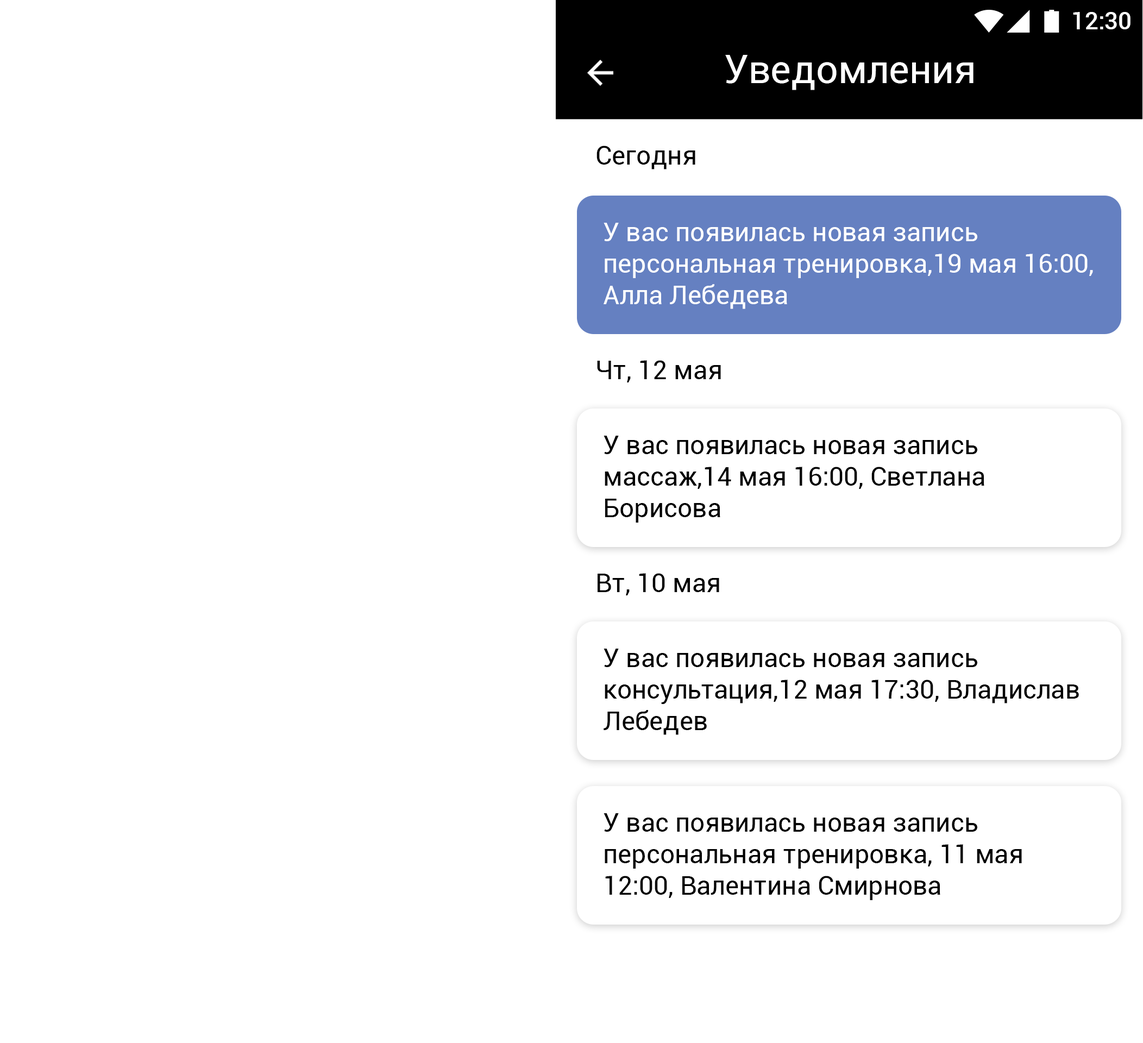
<style>
.page{position:relative;width:1143px;height:1043px;background:#ffffff}
.page>*{position:absolute;margin:0}
.t1{font:23.9px "Roboto-Medium";color:#ffffff}
.t2{font:39.1px "Roboto-Regular";color:#ffffff}
.t3{font:26.1px "Roboto-Regular";color:#000000}
.t4{font:26.1px "Roboto-Regular";color:#ffffff}
</style>
<div class="page">
<p class="t1" style="left:1073px;top:12px;width:58px;height:17px">12:30</p>
<p class="t2" style="left:725px;top:55px;width:249px;height:35px">Уведомления</p>
<p class="t3" style="left:597px;top:146px;width:98px;height:24px">Сегодня</p>
<p class="t4" style="left:604px;top:223px;width:489px;height:86px">У вас появилась новая запись <br>персональная тренировка,19 мая 16:00, Алла Лебедева</p>
<p class="t3" style="left:597px;top:360px;width:124px;height:22px">Чт, 12 мая</p>
<p class="t3" style="left:604px;top:436px;width:380px;height:87px">У вас появилась новая запись <br>массаж,14 мая 16:00, Светлана <br>Борисова</p>
<p class="t3" style="left:598px;top:573px;width:121px;height:22px">Вт, 10 мая</p>
<p class="t3" style="left:604px;top:649px;width:475px;height:86px">У вас появилась новая запись <br>консультация,12 мая 17:30, Владислав Лебедев</p>
<p class="t3" style="left:604px;top:813px;width:418px;height:87px">У вас появилась новая запись<br>персональная тренировка, 11 мая 12:00, Валентина Смирнова</p>
</div>
